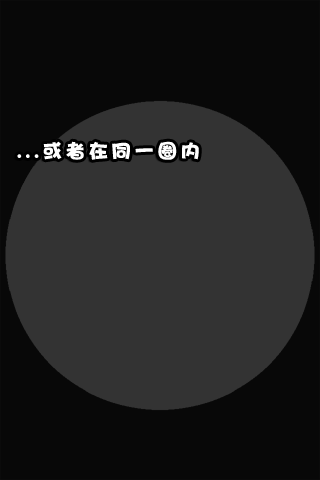
<style>
.page{position:relative;width:320px;height:480px;background:#080808}
.page>*{position:absolute;margin:0}
.t1{font:20px "DFPHaiBaoW12";letter-spacing:0.15em;color:#ffffff}
</style>
<div class="page">
<p class="t1" style="left:17px;top:141px;width:182px;height:19px">...或者在同一圈内</p>
</div>
